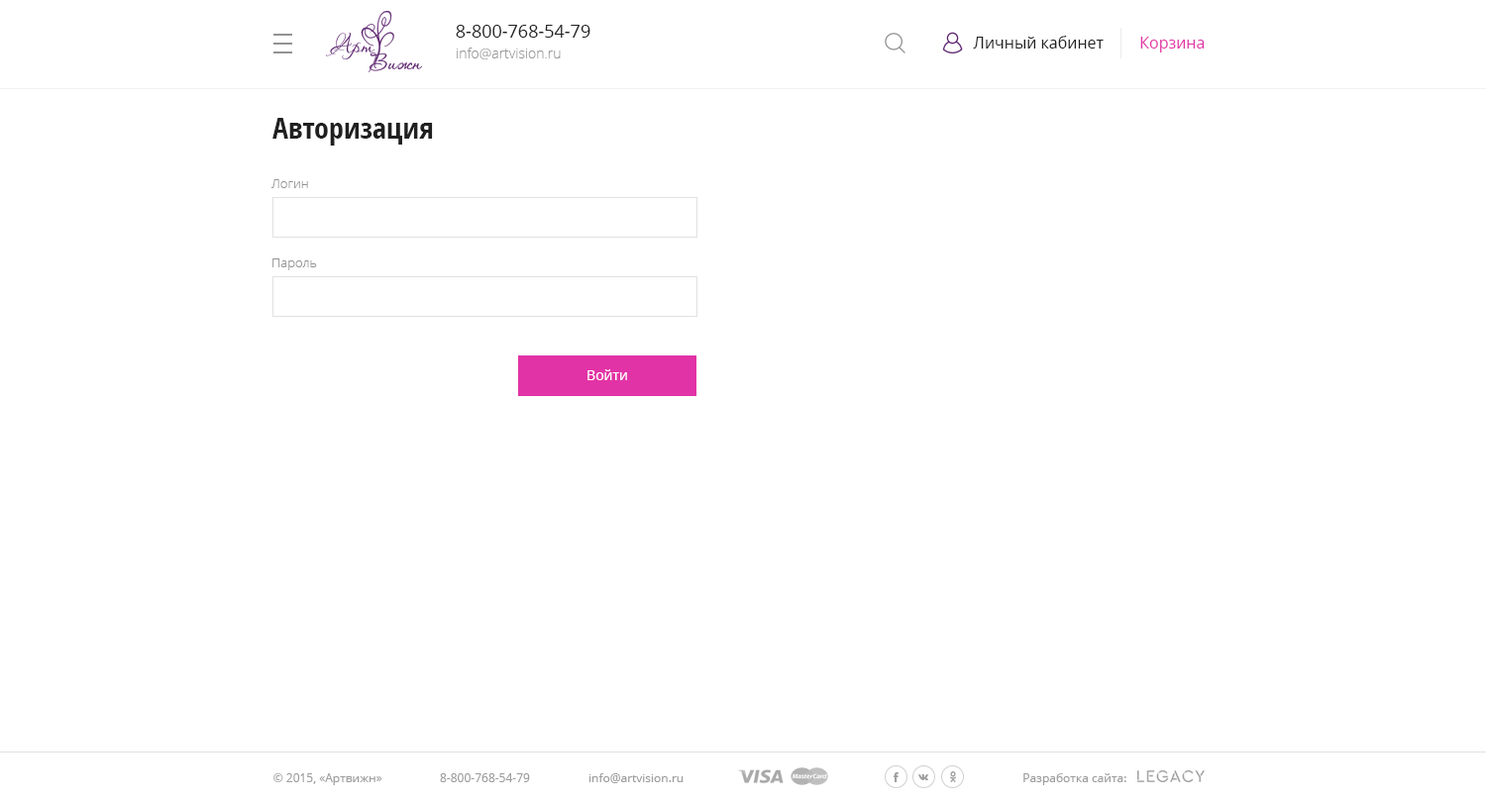
<style>
.page{position:relative;width:1486px;height:802px;background:#ffffff}
.page>*{position:absolute;margin:0}
.t1{font:17.8px "OpenSans";color:#202020}
.t2{font:15.9px "OpenSans";color:#202020}
.t3{font:15.9px "OpenSans";color:#e233a6}
.t4{font:13.9px "OpenSans-Light";color:#999999}
.t5{font:29.7px "OpenSans-CondensedBold";color:#202020}
.t6{font:12.9px "OpenSans-Light";color:#939393}
.t7{font:13.9px "OpenSans";color:#ffffff}
.t8{font:11.9px "OpenSans";color:#9e9d9d}
</style>
<div class="page">
<p class="t1" style="left:456px;top:25px;width:134px;height:13px">8-800-768-54-79</p>
<p class="t2" style="left:973px;top:36px;width:131px;height:13px">Личный кабинет</p>
<p class="t3" style="left:1140px;top:37px;width:65px;height:16px">Корзина</p>
<p class="t4" style="left:457px;top:48px;width:104px;height:11px">info@artvision.ru</p>
<p class="t5" style="left:272px;top:118px;width:161px;height:28px">Авторизация</p>
<p class="t6" style="left:270px;top:179px;width:38px;height:9px">Логин</p>
<p class="t6" style="left:272px;top:259px;width:45px;height:11px">Пароль</p>
<p class="t7" style="left:587px;top:370px;width:40px;height:10px">Войти</p>
<p class="t8" style="left:273px;top:774px;width:109px;height:12px">© 2015, «Артвижн»</p>
<p class="t8" style="left:440px;top:774px;width:90px;height:9px">8-800-768-54-79</p>
<p class="t8" style="left:588px;top:774px;width:96px;height:10px">info@artvision.ru</p>
<p class="t8" style="left:1023px;top:774px;width:103px;height:12px">Разработка сайта:</p>
</div>
